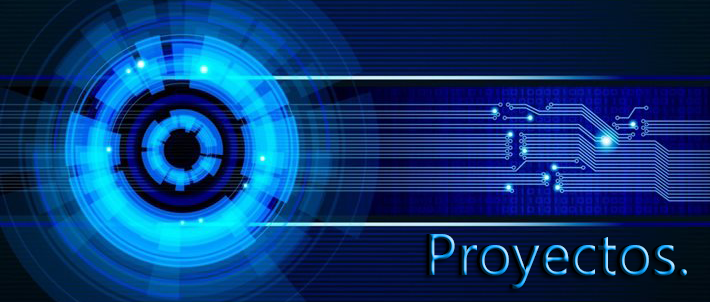
<style>
.page{position:relative;width:710px;height:302px}
.page>*{position:absolute;margin:0}
.t1{font:58.5px "Ebrima"}
</style>
<div class="page">
<p class="t1" style="left:429px;top:234px;width:258px;height:55px">Proyectos.</p>
</div>
